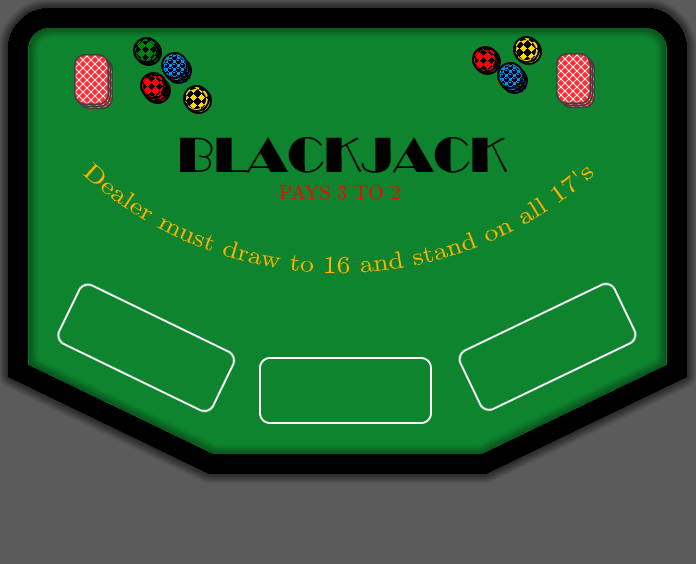
<style>
.page{position:relative;width:696px;height:564px;background:#0e842f}
.page>*{position:absolute;margin:0}
.t1{font:24px "LMRoman10-Regular";color:#ffb100}
.t2{font:20px "LMRoman10-Regular";color:#ff0000}
</style>
<div class="page">
<p class="t1" style="left:82px;top:162px;width:512px;height:112px">Dealer must draw to 16 and stand on all 17's</p>
<p class="t2" style="left:279px;top:184px;width:121px;height:16px">PAYS 3 TO 2</p>
</div>
